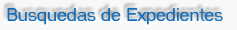
<style>
.page{position:relative;width:237px;height:30px;background:#f8f8f8}
.page>*{position:absolute;margin:0}
.t1{font:18px "MS Sans Serif";color:#146db9}
</style>
<div class="page">
<p class="t1" style="left:7px;top:8px;width:216px;height:17px">Busquedas de Expedientes</p>
</div>
